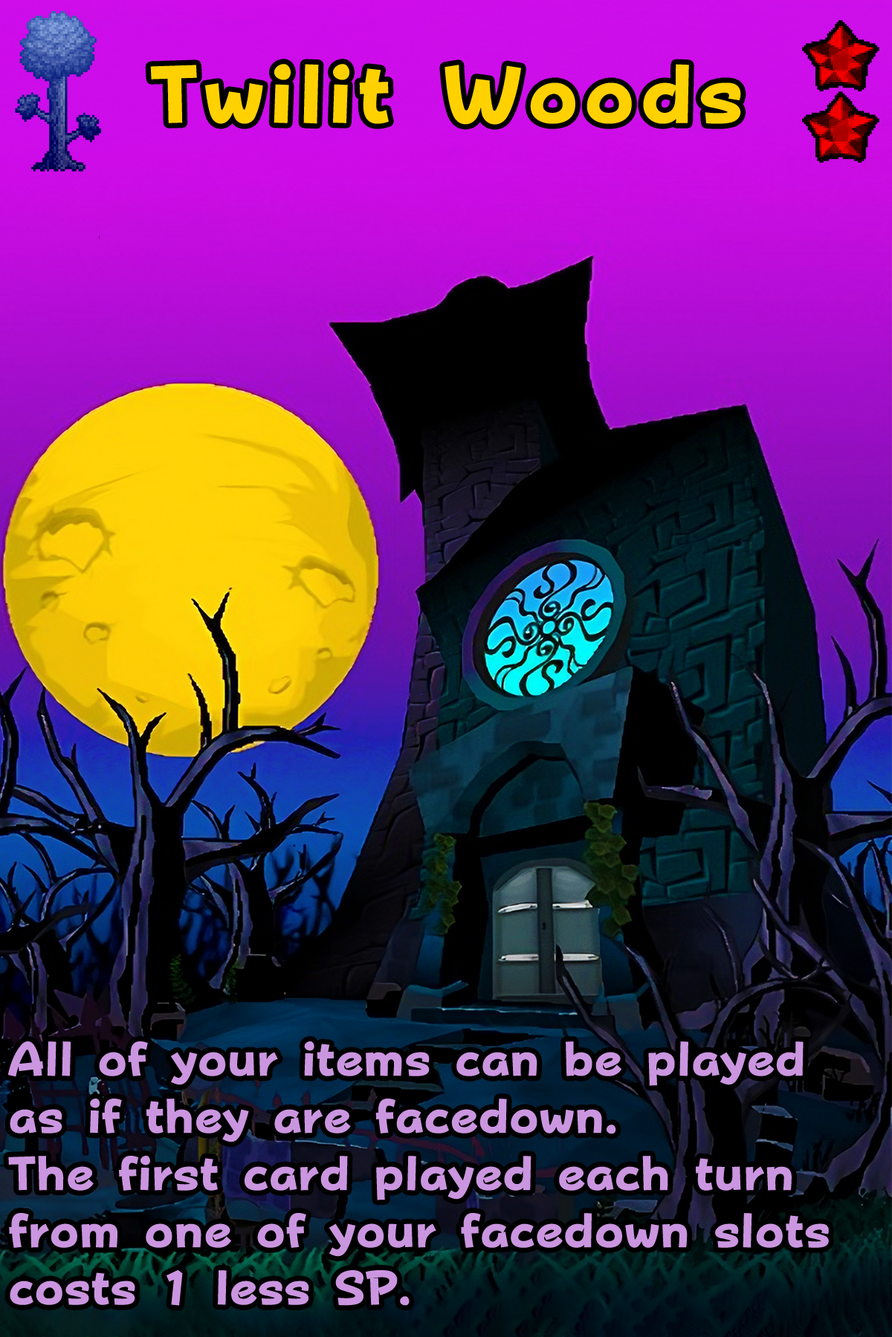
<style>
.page{position:relative;width:892px;height:1337px}
.page>*{position:absolute;margin:0}
.t1{font:140.7px "FOTPopHappinessStrp-ExtraBold";letter-spacing:0.06em;color:#ffd100}
.t2{font:81.7px/57.2px "FOTPopHappinessStrp-ExtraBold";color:#cb96e0}
</style>
<div class="page">
<p class="t1" style="left:150px;top:64px;width:591px;height:61px">Twilit Woods</p>
<p class="t2" style="left:7px;top:1042px;width:821px;height:264px">All of your items can be played as if they are facedown.<br>The first card played each turn from one of your facedown slots costs 1 less SP.</p>
</div>
